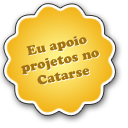
<style>
.page{position:relative;width:128px;height:128px;background:#ffffff}
.page>*{position:absolute;margin:0}
.t1{font:13px "CooperBlackStd"}
.t2{font:13px "CooperBlackStd";color:#a3730f}
</style>
<div class="page">
<p class="t1" style="left:21px;top:36px;width:79px;height:49px;text-align:center;rotate:-12deg">Eu apoio<br>projetos no<br>Catarse</p>
<p class="t2" style="left:21px;top:36px;width:78px;height:49px;text-align:center;rotate:-12deg">Eu apoio<br>projetos no<br>Catarse</p>
</div>
